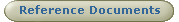
<style>
.page{position:relative;width:179px;height:22px}
.page>*{position:absolute;margin:0}
.t1{font:11px "Verdana-Bold";color:#336699}
</style>
<div class="page">
<p class="t1" style="left:20px;top:5px;width:140px;height:9px">Reference Documents</p>
</div>
